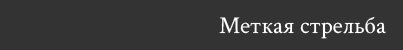
<style>
.page{position:relative;width:403px;height:50px;background:#333333}
.page>*{position:absolute;margin:0}
.t1{font:24px "CrimsonText-Regular";color:#ffffff}
</style>
<div class="page">
<p class="t1" style="left:219px;top:16px;width:167px;height:23px">Меткая стрельба</p>
</div>
